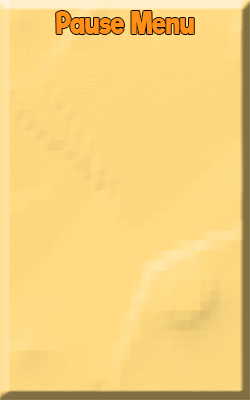
<style>
.page{position:relative;width:250px;height:400px}
.page>*{position:absolute;margin:0}
.t1{font:29.8px "RifficFree-Bold";color:#ff8f17;scale:0.83 1}
</style>
<div class="page">
<p class="t1" style="left:56px;top:11px;width:138px;height:23px">Pause Menu</p>
</div>
